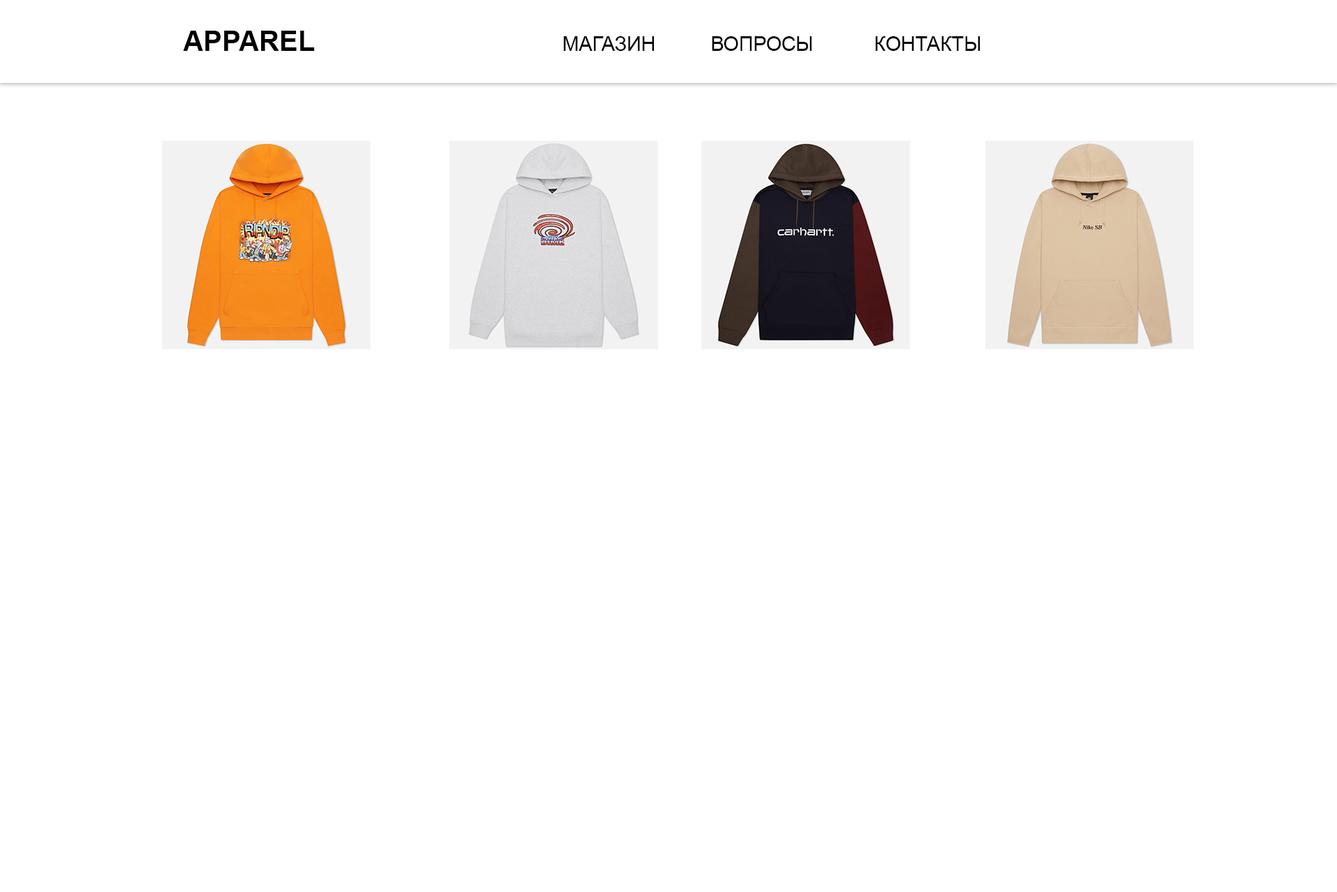
<style>
.page{position:relative;width:1337px;height:892px;background:#ffffff}
.page>*{position:absolute;margin:0}
.t1{font:28.2px "Arial-BoldMT";color:#000000}
.t2{font:19.9px "ArialMT";color:#000000}
</style>
<div class="page">
<p class="t1" style="left:183px;top:31px;width:132px;height:20px">APPAREL</p>
<p class="t2" style="left:564px;top:36px;width:417px;height:15px">МАГАЗИН          ВОПРОСЫ           КОНТАКТЫ</p>
</div>
